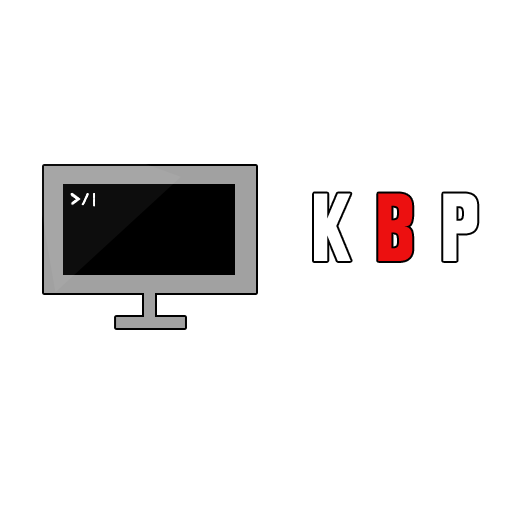
<style>
.page{position:relative;width:512px;height:512px;background:#ffffff}
.page>*{position:absolute;margin:0}
.t1{font:90px "RailroadGothic";color:#ffffff}
.t2{font:90px "RailroadGothic";color:#ec1010}
</style>
<div class="page">
<p class="t1" style="left:314px;top:193px;width:37px;height:68px">K</p>
<p class="t2" style="left:378px;top:193px;width:35px;height:68px">B</p>
<p class="t1" style="left:443px;top:193px;width:35px;height:68px">P</p>
</div>
